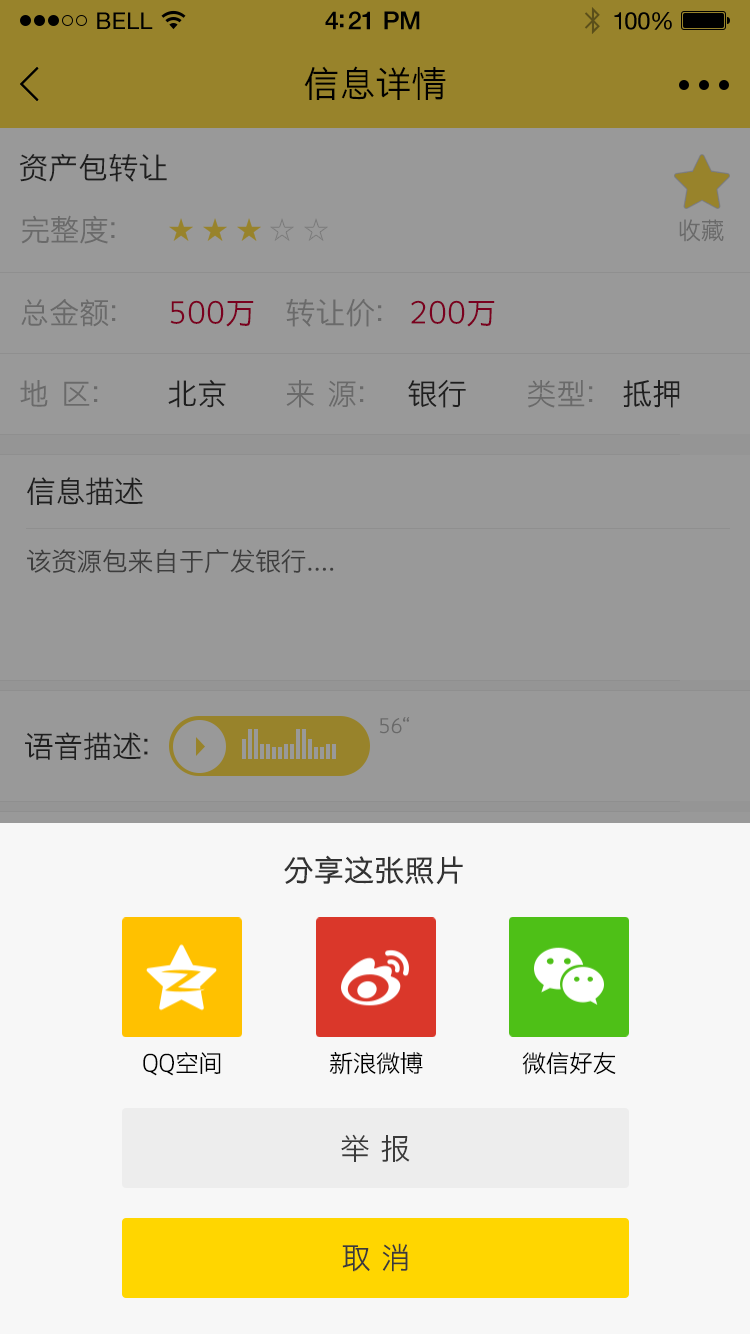
<style>
.page{position:relative;width:750px;height:1334px;background:#999999}
.page>*{position:absolute;margin:0}
.t1{font:23px "HelveticaNeue";letter-spacing:0.02em;color:#000000}
.t2{font:25px "HelveticaNeue-Medium";letter-spacing:-0.02em;color:#000000}
.t3{font:24px "HelveticaNeue";letter-spacing:-0.02em;color:#010101}
.t4{font:36px "STHeitiSC-Light";color:#000000}
.t5{font:30px "STHeitiSC-Light";color:#333333}
.t6{font:30px "STHeitiSC-Light";letter-spacing:-0.02em;color:#6a6a6a}
.t7{font:24px "STHeitiSC-Light";letter-spacing:-0.02em;color:#6a6a6a}
.t8{font:30px "STHeitiSC-Light";color:#6a6a6a}
.t9{font:30px "STHeitiSC-Light";color:#7a001f}
.t10{font:30px "STHeitiSC-Light";letter-spacing:-0.02em;color:#333333}
.t11{font:26px "STHeitiSC-Light";letter-spacing:-0.02em;color:#3d3d3d}
.t12{font:20px "STHeitiSC-Light";color:#696969}
.t13{font:30px "STHeitiSC-Light";letter-spacing:-0.02em;color:#333333;font-weight:bold}
.t14{font:24px "STHeitiSC-Light";letter-spacing:-0.02em;color:#000000}
.t15{font:30px "STHeitiSC-Light";letter-spacing:-0.02em;color:#3b3b3b}
</style>
<div class="page">
<p class="t1" style="left:97px;top:12px;width:56px;height:17px">BELL</p>
<p class="t1" style="left:97px;top:12px;width:56px;height:17px">BELL</p>
<p class="t2" style="left:325px;top:11px;width:95px;height:19px">4:21 PM</p>
<p class="t2" style="left:325px;top:11px;width:95px;height:19px">4:21 PM</p>
<p class="t3" style="left:614px;top:12px;width:58px;height:18px">100%</p>
<p class="t3" style="left:614px;top:12px;width:58px;height:18px">100%</p>
<p class="t4" style="left:304px;top:66px;width:142px;height:34px">信息详情</p>
<p class="t5" style="left:19px;top:153px;width:148px;height:29px">资产包转让</p>
<p class="t6" style="left:21px;top:215px;width:94px;height:29px">完整度：</p>
<p class="t7" style="left:679px;top:219px;width:45px;height:23px">收藏</p>
<p class="t8" style="left:21px;top:298px;width:95px;height:29px">总金额：</p>
<p class="t9" style="left:170px;top:300px;width:84px;height:27px">500万</p>
<p class="t8" style="left:286px;top:298px;width:96px;height:29px">转让价：</p>
<p class="t9" style="left:411px;top:300px;width:84px;height:27px">200万</p>
<p class="t8" style="left:20px;top:380px;width:78px;height:27px">地  区：</p>
<p class="t5" style="left:168px;top:379px;width:58px;height:29px">北京</p>
<p class="t8" style="left:286px;top:380px;width:78px;height:28px">来  源：</p>
<p class="t5" style="left:408px;top:379px;width:58px;height:29px">银行</p>
<p class="t8" style="left:528px;top:380px;width:65px;height:28px">类型：</p>
<p class="t5" style="left:623px;top:380px;width:57px;height:28px">抵押</p>
<p class="t10" style="left:27px;top:477px;width:116px;height:28px">信息描述</p>
<p class="t11" style="left:27px;top:549px;width:307px;height:24px">该资源包来自于广发银行....</p>
<p class="t12" style="left:379px;top:717px;width:31px;height:17px">56“</p>
<p class="t10" style="left:25px;top:732px;width:123px;height:28px">语音描述：</p>
<p class="t13" style="left:284px;top:855px;width:179px;height:30px">分享这张照片</p>
<p class="t14" style="left:143px;top:1052px;width:78px;height:24px">QQ空间</p>
<p class="t14" style="left:329px;top:1052px;width:94px;height:23px">新浪微博</p>
<p class="t14" style="left:522px;top:1052px;width:94px;height:23px">微信好友</p>
<p class="t15" style="left:341px;top:1134px;width:69px;height:28px">举  报</p>
<p class="t15" style="left:342px;top:1243px;width:66px;height:29px">取  消</p>
</div>
